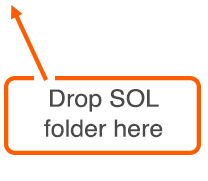
<style>
.page{position:relative;width:208px;height:181px;background:#ffffff}
.page>*{position:absolute;margin:0}
.t1{font:23.7px "Helvetica";color:#4b4b4b;scale:1.05 1}
</style>
<div class="page">
<p class="t1" style="left:44px;top:89px;width:119px;height:49px;text-align:center">Drop SOL<br>folder here</p>
</div>
